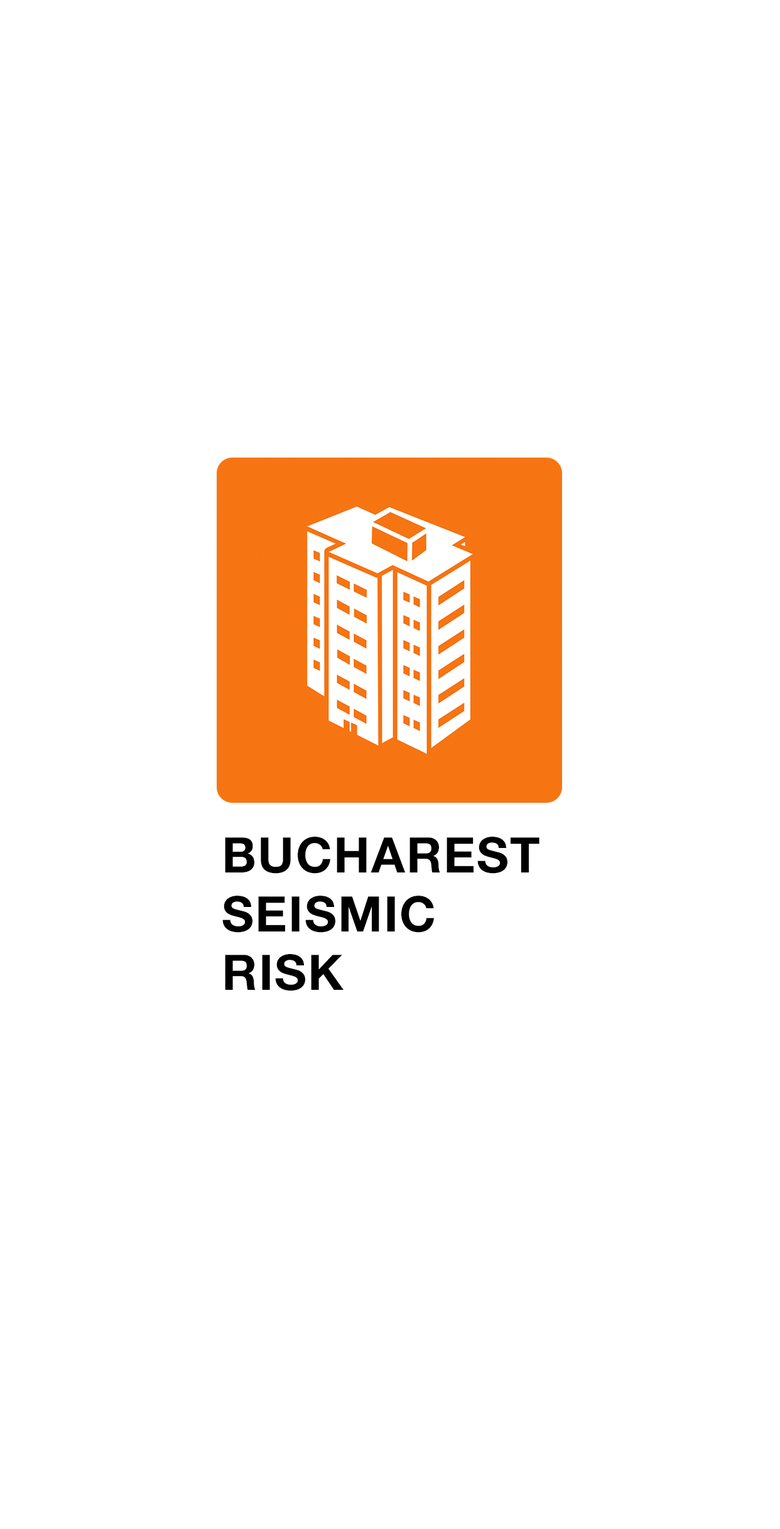
<style>
.page{position:relative;width:780px;height:1529px;background:#ffffff}
.page>*{position:absolute;margin:0}
.t1{font:49px "HelveticaNeue-Bold";letter-spacing:0.03em;color:#000000}
</style>
<div class="page">
<p class="t1" style="left:222px;top:837px;width:317px;height:154px">BUCHAREST SEISMIC <br>RISK</p>
</div>
